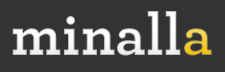
<style>
.page{position:relative;width:225px;height:72px;background:#333333}
.page>*{position:absolute;margin:0}
.t1{font:60px "Archer-Bold";letter-spacing:0.01em;color:#f9f9f9}
.t2{font:60px "Archer-Bold";letter-spacing:0.01em}
</style>
<div class="page">
<p class="t1" style="left:12px;top:11px;width:169px;height:45px">minall</p>
<p class="t2" style="left:184px;top:28px;width:28px;height:28px">a</p>
</div>
